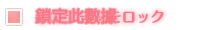
<style>
.page{position:relative;width:218px;height:30px;background:#ffffff}
.page>*{position:absolute;margin:0}
.t1{font:16px "AdobeFanHeitiStd-Bold";color:#f97887;font-weight:bold}
</style>
<div class="page">
<p class="t1" style="left:35px;top:8px;width:82px;height:16px">鎖定此數據</p>
</div>
